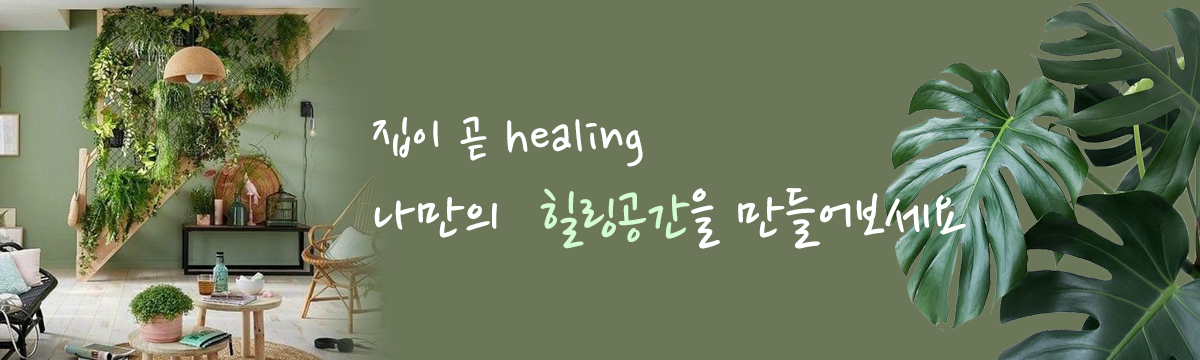
<style>
.page{position:relative;width:1200px;height:360px;background:#6c775a}
.page>*{position:absolute;margin:0}
.t1{font:60px "NanumPen";color:#ffffff}
.t2{font:69.3px "NanumPen";color:#ffffff}
.t3{font:69.3px "NanumPen";color:#d3fdcf}
</style>
<div class="page">
<p class="t1" style="left:373px;top:116px;width:593px;height:133px">집이 곧 healing<br><span class="t2">나만의  </span><span class="t3">힐링공간</span><span class="t2">을 만들어보세요</span></p>
</div>
